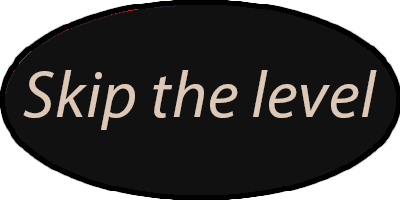
<style>
.page{position:relative;width:400px;height:200px;background:#111111}
.page>*{position:absolute;margin:0}
.t1{font:66.7px "MyriadPro-It";letter-spacing:0.01em;color:#ddc8b7}
</style>
<div class="page">
<p class="t1" style="left:23px;top:70px;width:354px;height:60px">Skip the level</p>
</div>
